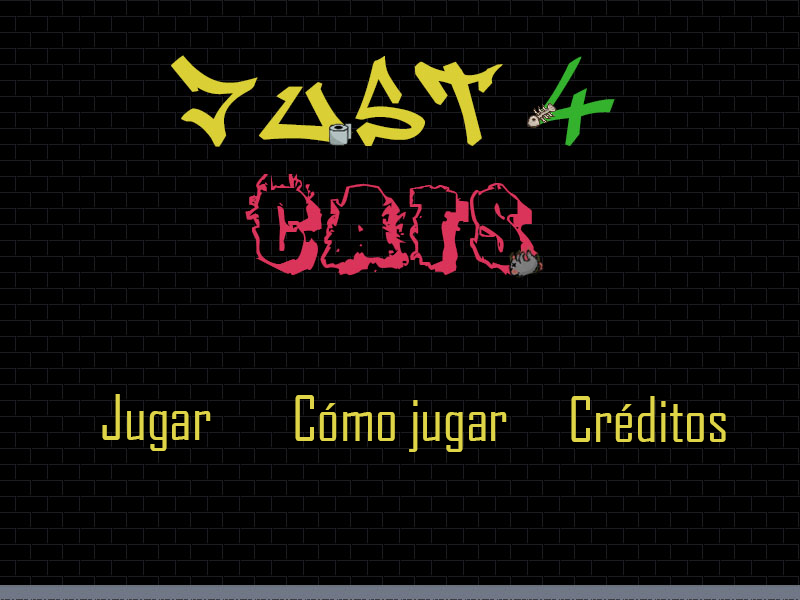
<style>
.page{position:relative;width:800px;height:600px;background:#000000}
.page>*{position:absolute;margin:0}
.t1{font:60px "AgencyFB-Reg";color:#dfd547}
</style>
<div class="page">
<p class="t1" style="left:102px;top:394px;width:109px;height:57px">Jugar</p>
<p class="t1" style="left:295px;top:395px;width:212px;height:57px">Cómo jugar</p>
<p class="t1" style="left:571px;top:396px;width:155px;height:46px">Créditos</p>
</div>
